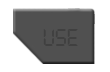
<style>
.page{position:relative;width:110px;height:72px;background:#ffffff}
.page>*{position:absolute;margin:0}
.t1{font:26px "DS-Digital";letter-spacing:-0.025em;color:#404040}
</style>
<div class="page">
<p class="t1" style="left:43px;top:29px;width:35px;height:17px">use</p>
</div>
